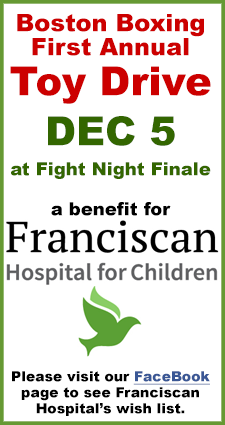
<style>
.page{position:relative;width:225px;height:425px;background:#ffffff}
.page>*{position:absolute;margin:0}
.t1{font:14px/16px "Arial-Black";color:#000000}
.t2{font:24px/24px "Arial-Black";color:#cc0000}
.t3{font:40px/40px "Arial-Black";color:#cc0000}
.t4{font:40px/50px "Arial-Black";color:#336600}
.t5{font:18px/30px "Arial-Black";color:#336600}
.t6{font:18px/40px "Arial-Black";color:#000000}
.t7{font:14px/30px "Arial-Black";color:#000000}
.t8{font:14px/30px "Arial-Black";color:#3a5795;text-decoration:underline}
</style>
<div class="page">
<p class="t1" style="left:10px;top:14px;width:201px;height:402px;text-align:center"><span class="t2">Boston Boxing<br>First Annual<br></span><span class="t3">Toy Drive<br></span><span class="t4">DEC 5<br></span><span class="t5">at Fight Night Finale<br></span><span class="t6">a benefit for<br><br><br><br><br></span><span class="t7">Please visit our </span><span class="t8">FaceBook </span>page to see Franciscan Hospital’s wish list.</p>
</div>
